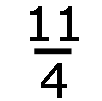
<style>
.page{position:relative;width:102px;height:101px;background:#ffffff}
.page>*{position:absolute;margin:0}
.t1{font:48px "Verdana";color:#000000}
</style>
<div class="page">
<p class="t1" style="left:30px;top:6px;width:49px;height:92px">11<br> 4</p>
</div>
